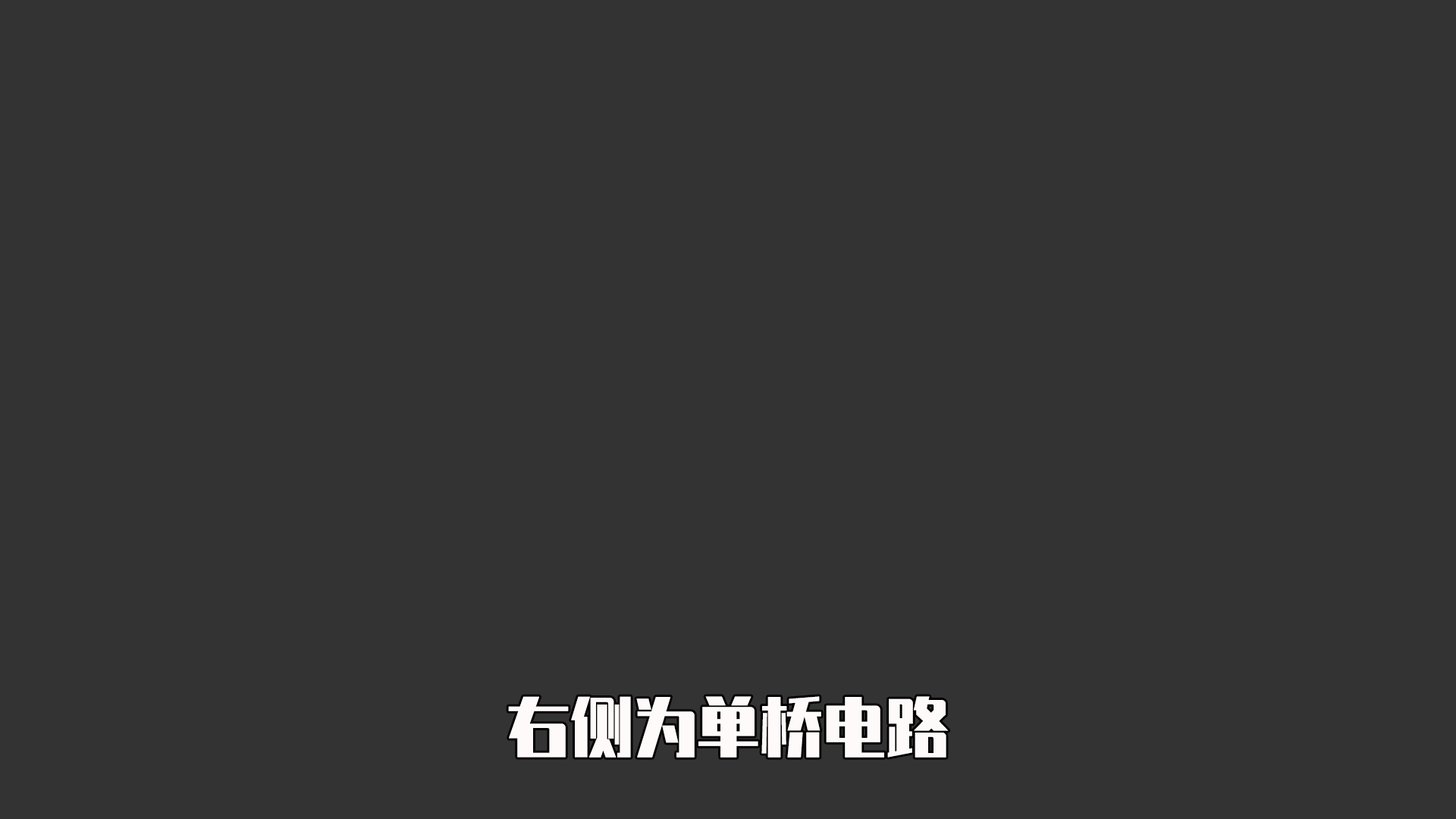
<style>
.page{position:relative;width:1456px;height:819px;background:#333333}
.page>*{position:absolute;margin:0}
.t1{font:63.2px "ZhenyanGB-Regular";color:#fefafa}
</style>
<div class="page">
<p class="t1" style="left:508px;top:696px;width:441px;height:62px">右侧为单桥电路</p>
</div>
